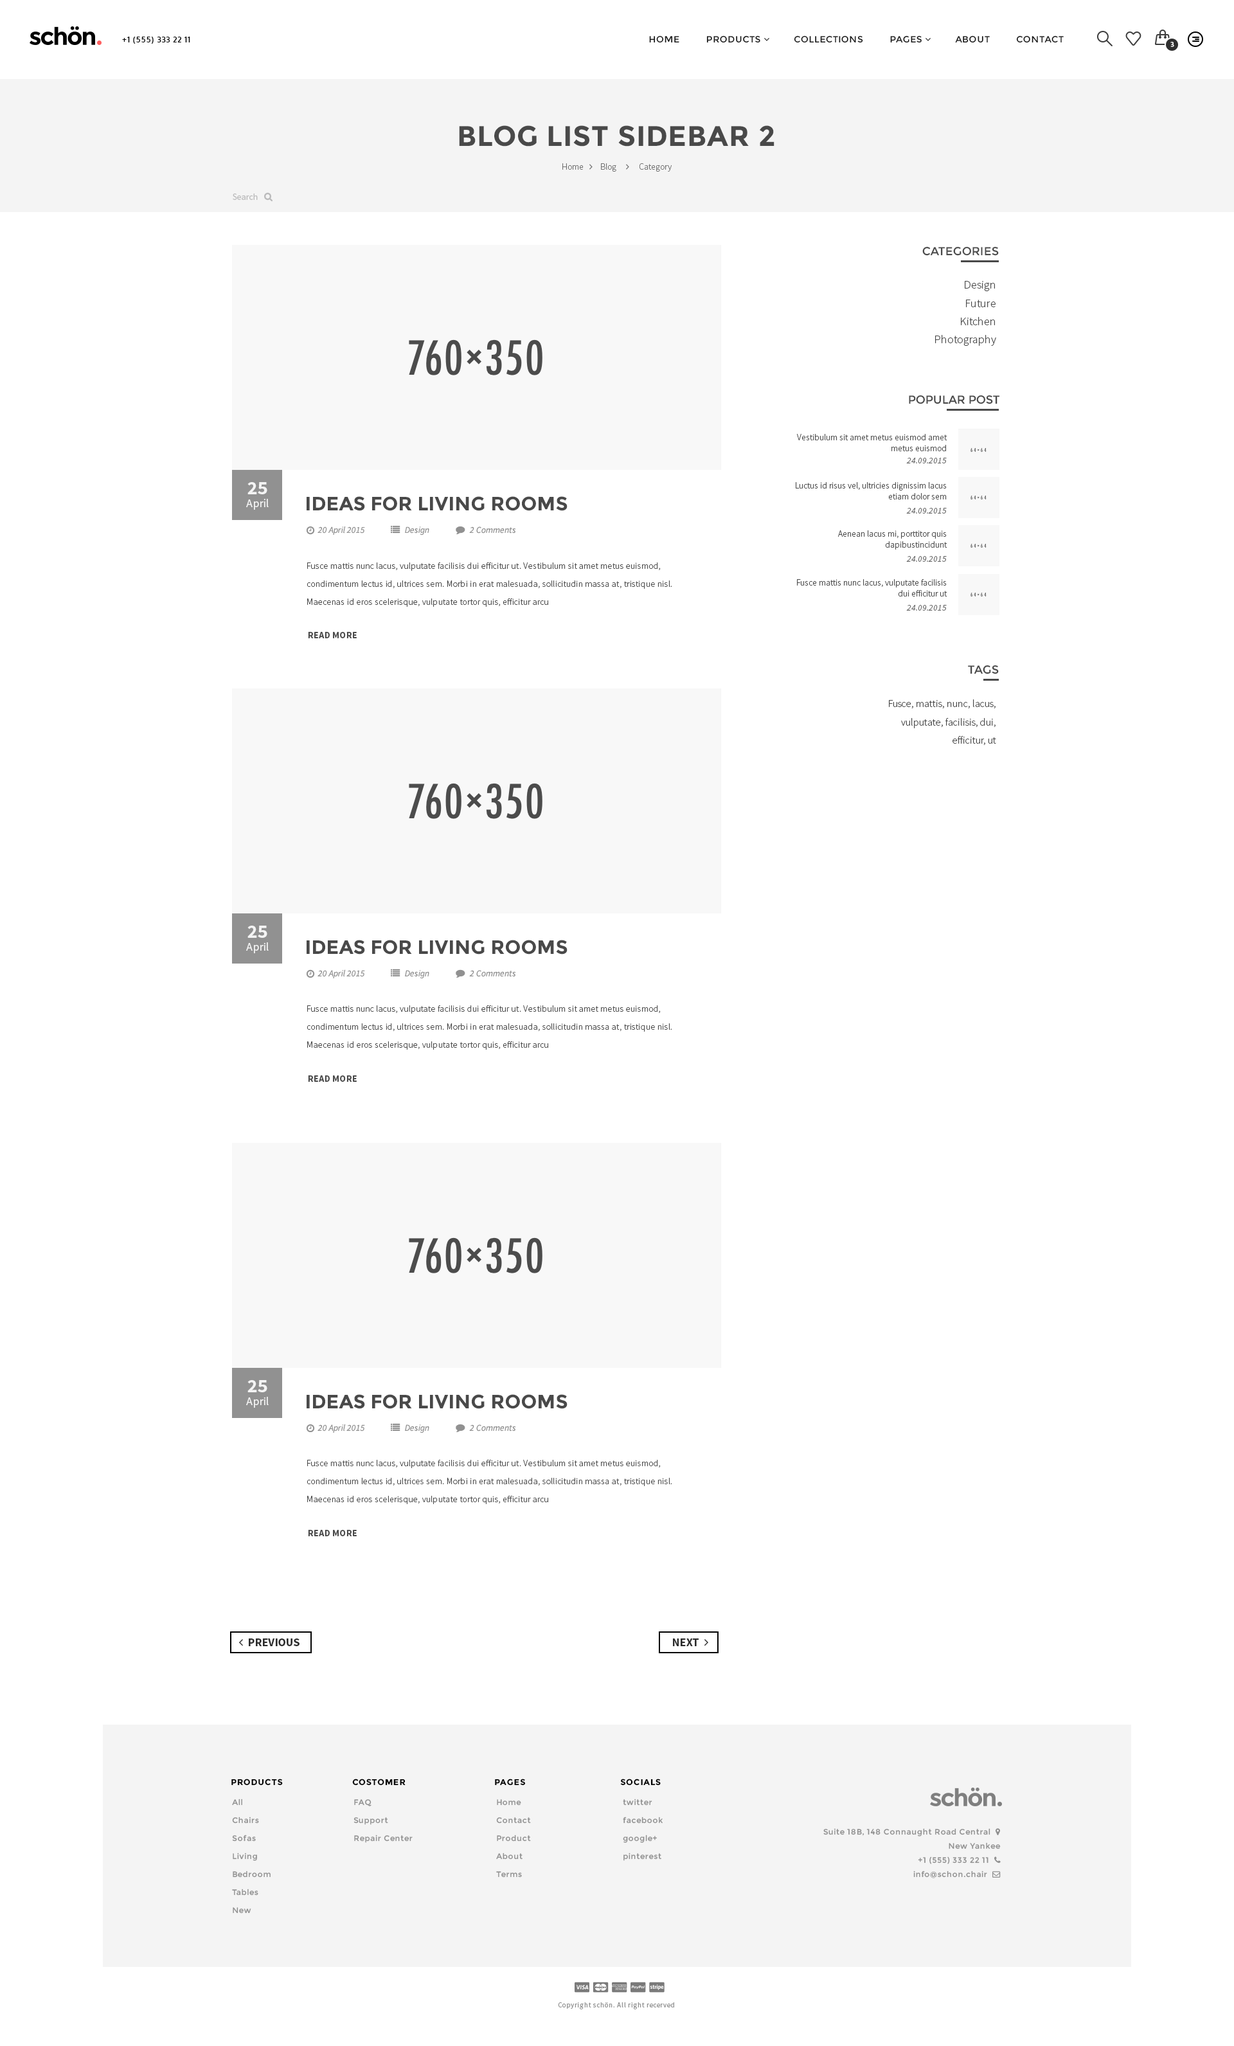
<style>
.page{position:relative;width:1234px;height:2046px;background:#ffffff}
.page>*{position:absolute;margin:0}
.t1{font:7.4px "Oxygen-Bold";letter-spacing:0.08em;color:#000000;scale:1.04 1}
.t2{font:7.1px "MyriadPro-Semibold";letter-spacing:0.08em;color:#ffffff}
.t3{font:28.3px "Montserrat-Bold";letter-spacing:0.02em;color:#494949}
.t4{font:9px "SourceSansPro-Regular";color:#bababb}
.t5{font:11.6px "Montserrat-Regular";color:#494949}
.t6{font:11.6px/18px "SourceSansPro-Light";color:#494949}
.t7{font:9px/10.9px "SourceSansPro-Light";color:#494949}
.t8{font:9px "SourceSansPro-It";color:#6b6b6b}
.t9{font:11.6px/12.9px "SourceSansPro-Regular";color:#f4f4f4}
.t10{font:19.3px/12.9px "SourceSansPro-Bold";color:#f4f4f4}
.t11{font:19.3px "Montserrat-Bold";color:#494949}
.t12{font:9px "SourceSansPro-It";color:#919191}
.t13{font:9px/18px "SourceSansPro-Light";letter-spacing:0.02em;color:#494949}
.t14{font:9px "SourceSansPro-Bold";letter-spacing:0.02em;color:#494949}
.t15{font:10.3px/18px "SourceSansPro-Light";color:#494949}
.t16{font:8.4px "Montserrat-Bold";letter-spacing:0.06em;color:#000000}
.t17{font:7.7px/18px "Montserrat-Regular";letter-spacing:0.06em;color:#8f8f8f}
.t18{font:7.1px "SourceSansPro-Regular";letter-spacing:0.06em;color:#8f8f8f}
</style>
<div class="page">
<p class="t1" style="left:122px;top:37px;width:68px;height:7px">+1 (555) 333 22 11</p>
<p class="t2" style="left:1171px;top:42px;width:3px;height:5px">3</p>
<p class="t3" style="left:459px;top:125px;width:316px;height:22px">BLOG LIST SIDEBAR 2</p>
<p class="t4" style="left:233px;top:194px;width:25px;height:6px">Search</p>
<p class="t5" style="left:923px;top:246px;width:76px;height:10px">CATEGORIES</p>
<p class="t6" style="left:935px;top:281px;width:61px;height:65px;text-align:right">Design<br>Future<br>Kitchen<br>Photography</p>
<p class="t5" style="left:909px;top:395px;width:91px;height:9px">POPULAR POST</p>
<p class="t7" style="left:797px;top:434px;width:151px;height:17px;text-align:right">Vestibulum sit amet metus euismod amet metus euismod</p>
<p class="t8" style="left:906px;top:458px;width:41px;height:6px">24.09.2015</p>
<p class="t9" style="left:246px;top:482px;width:23px;height:28px;text-align:center"><span class="t10">25<br></span>April</p>
<p class="t7" style="left:796px;top:482px;width:151px;height:18px;text-align:right">Luctus id risus vel, ultricies dignissim lacus<br>etiam dolor sem</p>
<p class="t11" style="left:307px;top:496px;width:261px;height:15px">IDEAS FOR LIVING ROOMS</p>
<p class="t8" style="left:906px;top:508px;width:41px;height:6px">24.09.2015</p>
<p class="t12" style="left:318px;top:526px;width:47px;height:9px">20 April 2015</p>
<p class="t12" style="left:405px;top:526px;width:24px;height:10px">Design</p>
<p class="t12" style="left:469px;top:526px;width:47px;height:8px">2 Comments</p>
<p class="t7" style="left:838px;top:530px;width:110px;height:20px;text-align:right">Aenean lacus mi, porttitor quis dapibustincidunt</p>
<p class="t8" style="left:906px;top:556px;width:41px;height:6px">24.09.2015</p>
<p class="t13" style="left:307px;top:562px;width:365px;height:45px">Fusce mattis nunc lacus, vulputate facilisis dui efficitur ut. Vestibulum sit amet metus euismod, condimentum lectus id, ultrices sem. Morbi in erat malesuada, sollicitudin massa at, tristique nisl. Maecenas id eros scelerisque, vulputate tortor quis, efficitur arcu</p>
<p class="t7" style="left:797px;top:579px;width:151px;height:18px;text-align:right">Fusce mattis nunc lacus, vulputate facilisis dui efficitur ut</p>
<p class="t8" style="left:906px;top:605px;width:41px;height:6px">24.09.2015</p>
<p class="t14" style="left:308px;top:632px;width:49px;height:6px">READ MORE</p>
<p class="t5" style="left:968px;top:665px;width:31px;height:9px">TAGS</p>
<p class="t15" style="left:889px;top:699px;width:107px;height:46px;text-align:right">Fusce, mattis, nunc, lacus,<br>vulputate, facilisis, dui,<br>efficitur, ut</p>
<p class="t9" style="left:246px;top:926px;width:23px;height:27px;text-align:center"><span class="t10">25<br></span>April</p>
<p class="t11" style="left:307px;top:940px;width:261px;height:15px">IDEAS FOR LIVING ROOMS</p>
<p class="t12" style="left:318px;top:969px;width:47px;height:9px">20 April 2015</p>
<p class="t12" style="left:405px;top:970px;width:24px;height:9px">Design</p>
<p class="t12" style="left:469px;top:970px;width:47px;height:7px">2 Comments</p>
<p class="t13" style="left:307px;top:1005px;width:365px;height:45px">Fusce mattis nunc lacus, vulputate facilisis dui efficitur ut. Vestibulum sit amet metus euismod, condimentum lectus id, ultrices sem. Morbi in erat malesuada, sollicitudin massa at, tristique nisl. Maecenas id eros scelerisque, vulputate tortor quis, efficitur arcu</p>
<p class="t14" style="left:308px;top:1076px;width:49px;height:6px">READ MORE</p>
<p class="t9" style="left:246px;top:1380px;width:23px;height:28px;text-align:center"><span class="t10">25<br></span>April</p>
<p class="t11" style="left:307px;top:1394px;width:261px;height:15px">IDEAS FOR LIVING ROOMS</p>
<p class="t12" style="left:318px;top:1424px;width:47px;height:9px">20 April 2015</p>
<p class="t12" style="left:405px;top:1425px;width:24px;height:9px">Design</p>
<p class="t12" style="left:469px;top:1425px;width:47px;height:7px">2 Comments</p>
<p class="t13" style="left:307px;top:1460px;width:365px;height:44px">Fusce mattis nunc lacus, vulputate facilisis dui efficitur ut. Vestibulum sit amet metus euismod, condimentum lectus id, ultrices sem. Morbi in erat malesuada, sollicitudin massa at, tristique nisl. Maecenas id eros scelerisque, vulputate tortor quis, efficitur arcu</p>
<p class="t14" style="left:308px;top:1530px;width:49px;height:6px">READ MORE</p>
<p class="t16" style="left:231px;top:1779px;width:52px;height:7px">PRODUCTS</p>
<p class="t16" style="left:352px;top:1779px;width:54px;height:7px">COSTOMER</p>
<p class="t16" style="left:495px;top:1779px;width:31px;height:7px">PAGES</p>
<p class="t16" style="left:620px;top:1779px;width:41px;height:7px">SOCIALS</p>
<p class="t17" style="left:232px;top:1799px;width:39px;height:115px">All<br>Chairs<br>Sofas<br>Living<br>Bedroom<br>Tables<br>New</p>
<p class="t17" style="left:354px;top:1799px;width:59px;height:44px">FAQ<br>Support<br>Repair Center</p>
<p class="t17" style="left:496px;top:1799px;width:35px;height:79px">Home<br>Contact<br>Product<br>About<br>Terms</p>
<p class="t17" style="left:623px;top:1799px;width:40px;height:62px">twitter<br>facebook<br>google+<br>pinterest</p>
<p class="t18" style="left:558px;top:2003px;width:116px;height:7px">Copyright schön. All right recerved</p>
</div>
